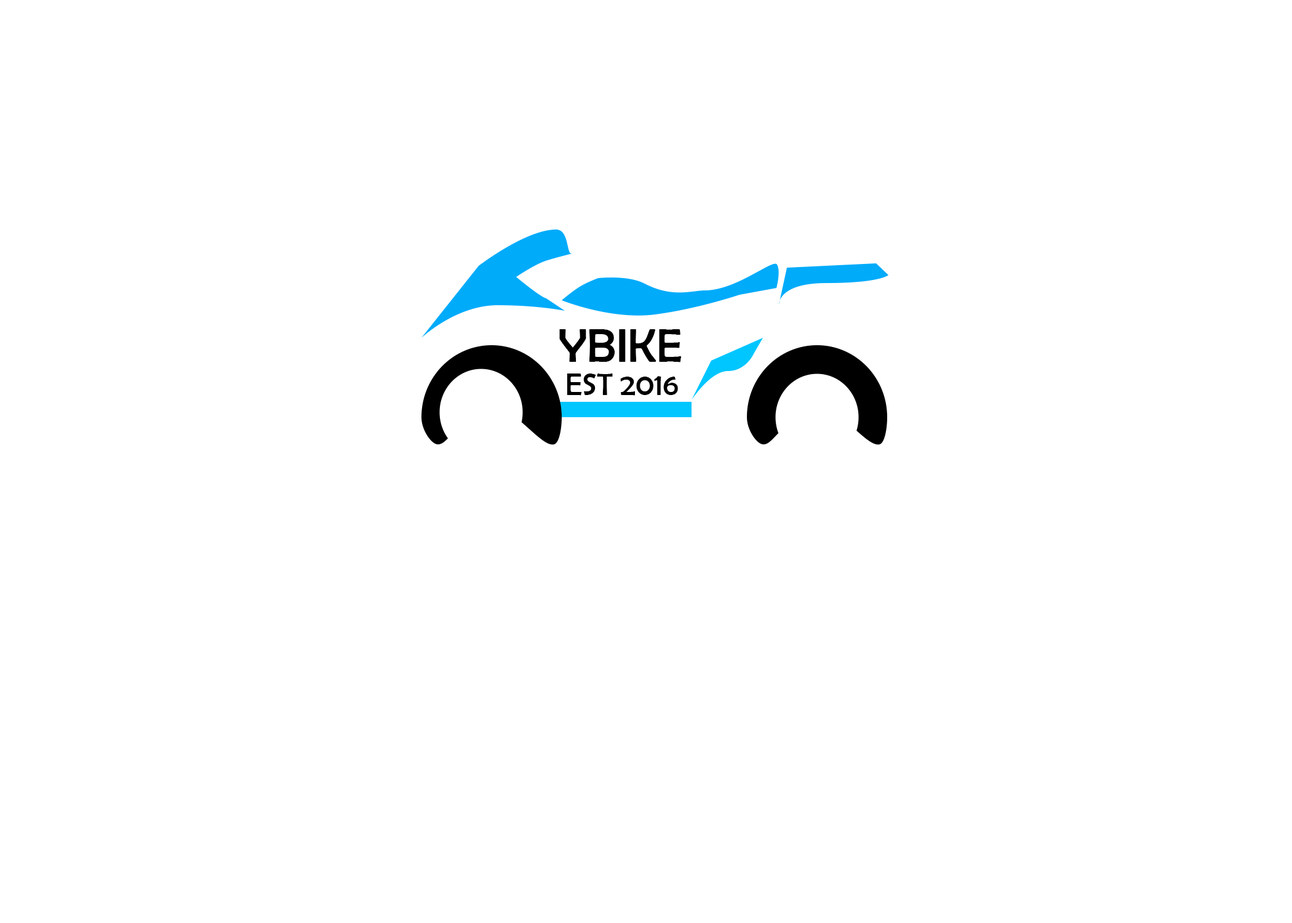
<style>
.page{position:relative;width:1292px;height:923px;background:#ffffff}
.page>*{position:absolute;margin:0}
.t1{font:48.2px "BerlinSansFB-Reg";color:#000000}
.t2{font:31.1px "BerlinSansFB-Reg";color:#000000}
</style>
<div class="page">
<p class="t1" style="left:559px;top:329px;width:123px;height:33px">YBIKE</p>
<p class="t2" style="left:567px;top:373px;width:111px;height:23px">EST 2016</p>
</div>
